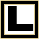
<style>
.page{position:relative;width:39px;height:39px;background:#000000}
.page>*{position:absolute;margin:0}
.t1{font:36px "Coalition";color:#000000}
</style>
<div class="page">
<p class="t1" style="left:8px;top:6px;width:26px;height:25px">l</p>
</div>
